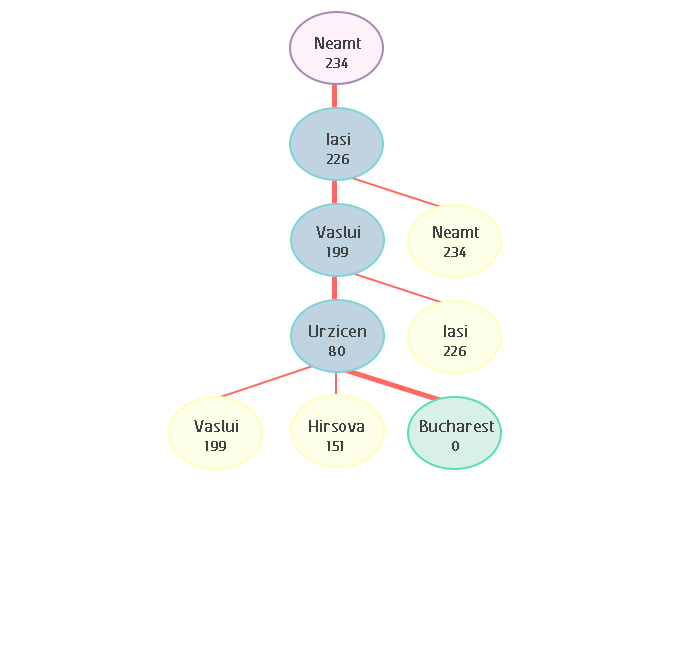
<style>
.page{position:relative;width:674px;height:660px;background:#ffffff}
.page>*{position:absolute;margin:0}
.t1{font:20.8px "FCActiveRegular";color:#424242;font-weight:bold}
.t2{font:16.7px "FCActiveRegular";color:#424141;font-weight:bold}
</style>
<div class="page">
<p class="t1" style="left:315px;top:37px;width:46px;height:12px">Neamt</p>
<p class="t2" style="left:326px;top:58px;width:22px;height:10px">234</p>
<p class="t1" style="left:327px;top:133px;width:23px;height:12px">Iasi</p>
<p class="t2" style="left:327px;top:154px;width:22px;height:10px">226</p>
<p class="t1" style="left:316px;top:226px;width:44px;height:12px">Vaslui</p>
<p class="t1" style="left:433px;top:226px;width:46px;height:12px">Neamt</p>
<p class="t2" style="left:327px;top:247px;width:21px;height:10px">199</p>
<p class="t2" style="left:444px;top:247px;width:22px;height:10px">234</p>
<p class="t1" style="left:309px;top:325px;width:57px;height:12px">Urzicen</p>
<p class="t1" style="left:444px;top:325px;width:23px;height:12px">Iasi</p>
<p class="t2" style="left:329px;top:346px;width:16px;height:10px">80</p>
<p class="t2" style="left:444px;top:346px;width:22px;height:10px">226</p>
<p class="t1" style="left:194px;top:420px;width:44px;height:12px">Vaslui</p>
<p class="t1" style="left:309px;top:420px;width:55px;height:12px">Hirsova</p>
<p class="t1" style="left:420px;top:420px;width:74px;height:12px">Bucharest</p>
<p class="t2" style="left:205px;top:441px;width:21px;height:10px">199</p>
<p class="t2" style="left:327px;top:441px;width:16px;height:10px">151</p>
<p class="t2" style="left:452px;top:441px;width:7px;height:10px">0</p>
</div>
